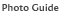
<style>
.page{position:relative;width:61px;height:16px;background:#ffffff}
.page>*{position:absolute;margin:0}
.t1{font:10.4px "AmiraParadiso";color:#474747}
</style>
<div class="page">
<p class="t1" style="left:2px;top:4px;width:57px;height:7px">Photo Guide</p>
</div>
